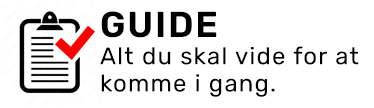
<style>
.page{position:relative;width:374px;height:108px;background:#ffffff}
.page>*{position:absolute;margin:0}
.t1{font:24px/27.2px "Rubik-Regular";letter-spacing:0.05em;color:#000000}
.t2{font:36px/27.2px "Rubik-SemiBold";letter-spacing:0.05em;color:#000000}
</style>
<div class="page">
<p class="t1" style="left:100px;top:11px;width:259px;height:86px"><span class="t2">GUIDE<br></span>Alt du skal vide for at<br>komme i gang.</p>
</div>
